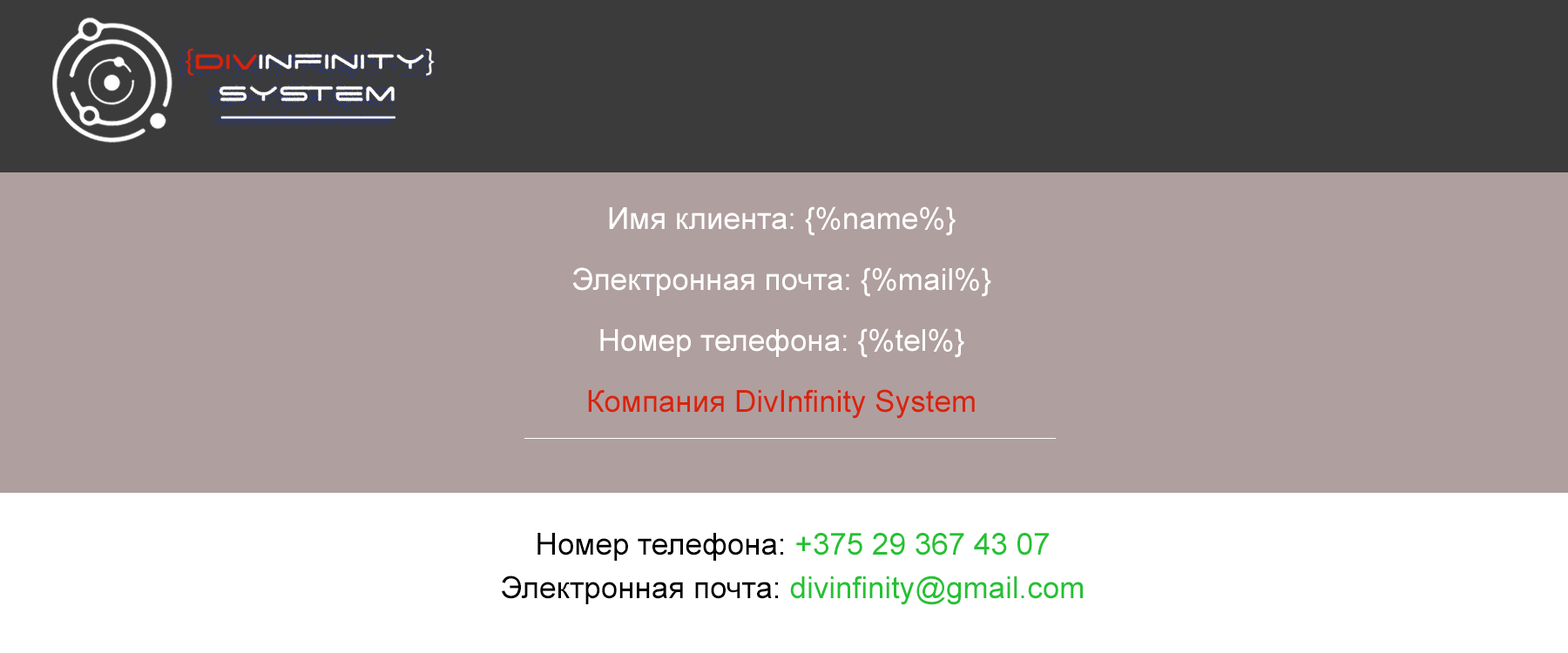
<style>
.page{position:relative;width:1568px;height:653px;background:#b09f9f}
.page>*{position:absolute;margin:0}
.t1{font:30.5px/30.5px "ArialMT";color:#ffffff}
.t2{font:30.5px/30.5px "ArialMT";color:#d8240c}
.t3{font:30.5px/43.6px "ArialMT";color:#23c232}
.t4{font:30.5px/43.6px "ArialMT";color:#000000}
</style>
<div class="page">
<p class="t1" style="left:572px;top:206px;width:419px;height:213px;text-align:center">Имя клиента: {%name%}<br><br>Электронная почта: {%mail%}<br><br>Номер телефона: {%tel%}<br><br><span class="t2">Компания DivInfinity System</span></p>
<p class="t3" style="left:502px;top:533px;width:581px;height:72px;text-align:center"><span class="t4">Номер телефона: </span>+375 29 367 43 07<br><span class="t4">Электронная почта: </span>divinfinity@gmail.com</p>
</div>
